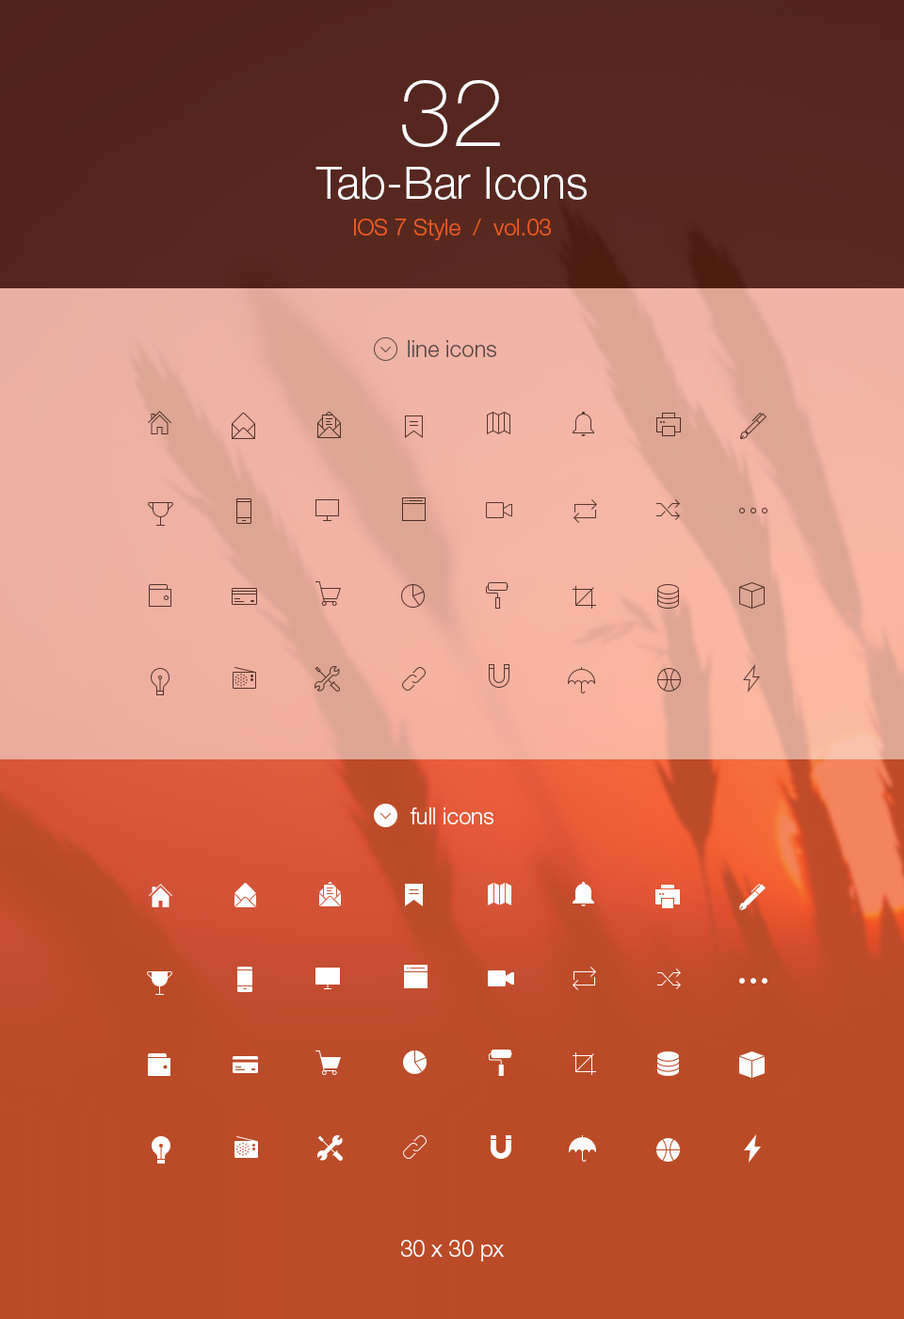
<style>
.page{position:relative;width:904px;height:1319px}
.page>*{position:absolute;margin:0}
.t1{font:22.6px/36.7px "HelveticaNeueLTStd-Lt";color:#f05b24}
.t2{font:94.2px/47.1px "HelveticaNeueLTStd-Th";color:#ffffff}
.t3{font:45.2px/52.7px "HelveticaNeueLTStd-Lt";color:#ffffff}
.t4{font:22.6px "HelveticaNeueLTStd-Lt";color:#594945}
.t5{font:22.6px "HelveticaNeueLTStd-Lt";color:#ffffff}
</style>
<div class="page">
<p class="t1" style="left:316px;top:80px;width:271px;height:160px;text-align:center"><span class="t2">32<br></span><span class="t3">Tab-Bar Icons<br></span>IOS 7 Style  /  vol.03</p>
<p class="t4" style="left:408px;top:340px;width:88px;height:17px">line icons</p>
<p class="t5" style="left:410px;top:807px;width:84px;height:17px">full icons</p>
<p class="t5" style="left:401px;top:1240px;width:103px;height:21px">30 x 30 px</p>
</div>
